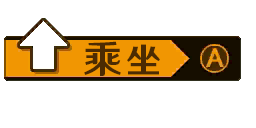
<style>
.page{position:relative;width:256px;height:128px;background:#ffffff}
.page>*{position:absolute;margin:0}
.t1{font:39px "HYWenHei-HEW";letter-spacing:0.125em;color:#4c2b02}
.t2{font:35px "HYWenHei-HEW";letter-spacing:0.125em;color:#4c2b02}
</style>
<div class="page">
<p class="t1" style="left:84px;top:41px;width:37px;height:35px">乘</p>
<p class="t2" style="left:127px;top:44px;width:33px;height:31px">坐</p>
</div>
